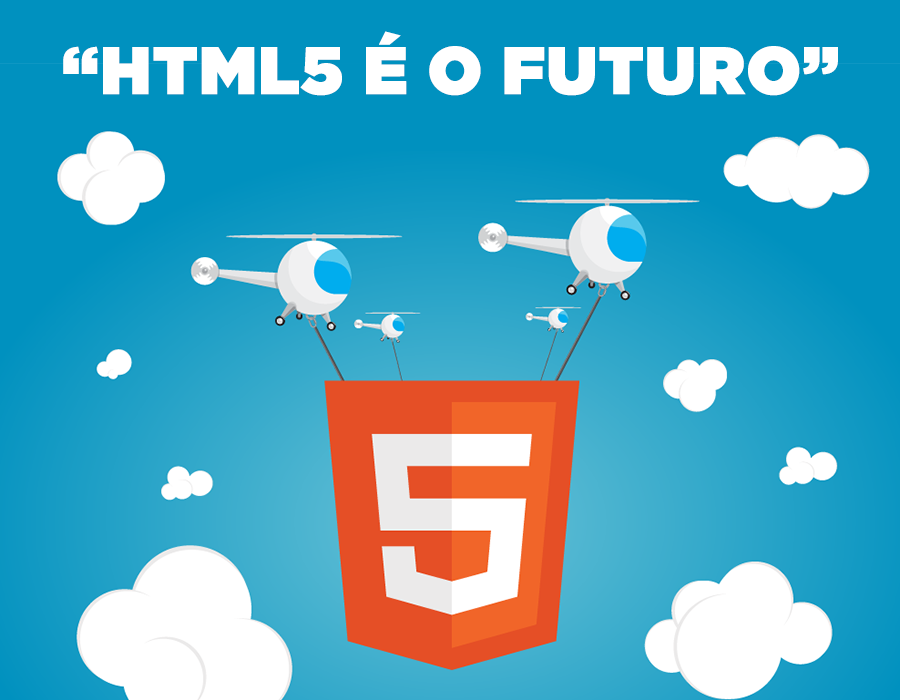
<style>
.page{position:relative;width:900px;height:700px;background:#0091bf}
.page>*{position:absolute;margin:0}
.t1{font:66.7px "GothamUltra";color:#ffffff;font-weight:bold}
</style>
<div class="page">
<p class="t1" style="left:63px;top:31px;width:775px;height:65px">“HTML5 É O FUTURO”</p>
</div>
